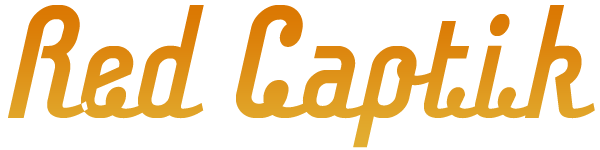
<style>
.page{position:relative;width:600px;height:150px;background:#ffffff}
.page>*{position:absolute;margin:0}
.t1{font:142px "Chaingothic";color:#df941a}
</style>
<div class="page">
<p class="t1" style="left:8px;top:5px;width:587px;height:143px">Red Captik</p>
</div>
